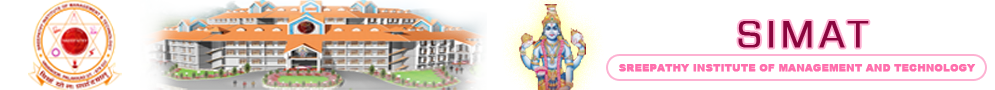
<style>
.page{position:relative;width:995px;height:90px;background:#ffffff}
.page>*{position:absolute;margin:0}
.t1{font:36px "Square721BT-Roman";letter-spacing:0.1em;color:#8a053d;font-weight:bold}
.t2{font:10px "Arial-Black";color:#ff70ad;font-weight:bold}
</style>
<div class="page">
<p class="t1" style="left:738px;top:21px;width:131px;height:27px">SIMAT</p>
<p class="t2" style="left:619px;top:64px;width:357px;height:8px">SREEPATHY INSTITUTE OF MANAGEMENT AND TECHNOLOGY</p>
</div>
